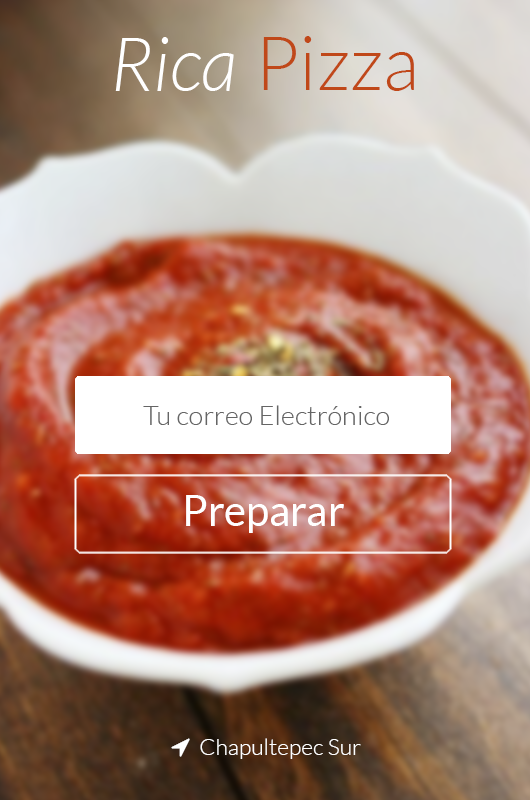
<style>
.page{position:relative;width:530px;height:800px}
.page>*{position:absolute;margin:0}
.t1{font:75.1px "Lato-LightItalic";color:#ffffff}
.t2{font:75.1px "Lato-Light";color:#c04819}
.t3{font:27.1px "Lato-Light";color:#656565}
.t4{font:41.7px "Lato-Regular";color:#ffffff}
</style>
<div class="page">
<p class="t1" style="left:115px;top:37px;width:119px;height:54px">Rica</p>
<p class="t2" style="left:263px;top:36px;width:151px;height:55px">Pizza</p>
<p class="t3" style="left:143px;top:405px;width:246px;height:20px">Tu correo Electrónico</p>
<p class="t4" style="left:186px;top:495px;width:158px;height:38px">Preparar</p>
</div>
